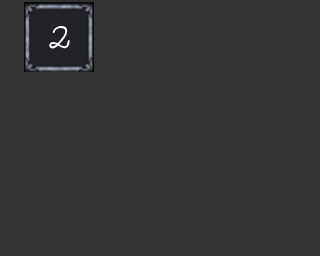
<style>
.page{position:relative;width:320px;height:256px;background:#333333}
.page>*{position:absolute;margin:0}
.t1{font:43px "BadScript-Regular";color:#ffffff}
</style>
<div class="page">
<p class="t1" style="left:49px;top:26px;width:21px;height:23px">2</p>
</div>
